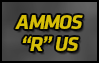
<style>
.page{position:relative;width:99px;height:63px}
.page>*{position:absolute;margin:0}
.t1{font:21px/22px "Klavika-Bold";letter-spacing:-0.05em;color:#e4c900;font-style:italic}
</style>
<div class="page">
<p class="t1" style="left:15px;top:15px;width:68px;height:36px;text-align:center;opacity:0.89">AMMOS<br>“R” US</p>
</div>
